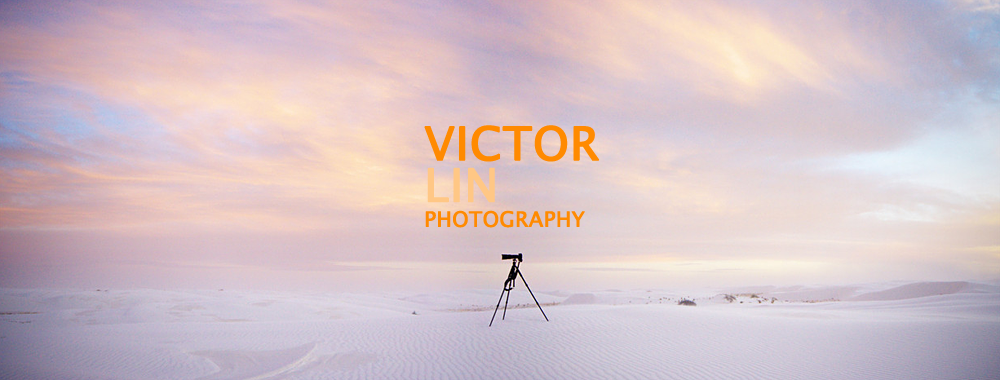
<style>
.page{position:relative;width:1000px;height:380px}
.page>*{position:absolute;margin:0}
.t1{font:20.8px "LucidaSansUnicode";color:#ff8a00;font-weight:bold}
.t2{font:45.8px "LucidaSansUnicode";color:#ff8a00;font-weight:bold}
.t3{font:45.8px/41.7px "LucidaSansUnicode";color:#ffc785;font-weight:bold}
</style>
<div class="page">
<p class="t1" style="left:424px;top:125px;width:176px;height:103px"><span class="t2">VICTOR<br></span><span class="t3">LIN<br></span>PHOTOGRAPHY</p>
</div>
